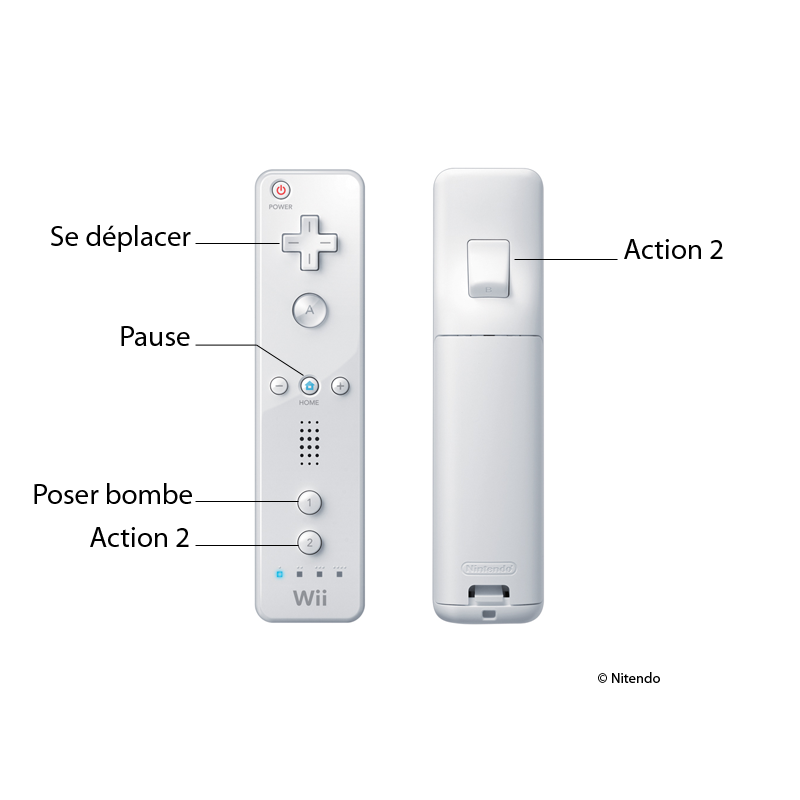
<style>
.page{position:relative;width:800px;height:800px;background:#ffffff}
.page>*{position:absolute;margin:0}
.t1{font:29.2px "MyriadPro-Regular";color:#000000}
.t2{font:14.6px "MyriadPro-Regular";color:#000000}
</style>
<div class="page">
<p class="t1" style="left:51px;top:225px;width:140px;height:27px">Se déplacer</p>
<p class="t1" style="left:624px;top:239px;width:99px;height:20px">Action 2</p>
<p class="t1" style="left:121px;top:326px;width:69px;height:20px">Pause</p>
<p class="t1" style="left:34px;top:483px;width:158px;height:21px">Poser bombe</p>
<p class="t1" style="left:90px;top:527px;width:99px;height:20px">Action 2</p>
<p class="t2" style="left:598px;top:672px;width:62px;height:11px">© Nitendo</p>
</div>
